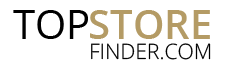
<style>
.page{position:relative;width:228px;height:72px;background:#ffffff}
.page>*{position:absolute;margin:0}
.t1{font:40px "OpenSans";color:#000000}
.t2{font:40px "OpenSans-Semibold";color:#b49b65}
.t3{font:21.3px "OpenSans-Light";color:#000000}
</style>
<div class="page">
<p class="t1" style="left:13px;top:10px;width:75px;height:29px">TOP</p>
<p class="t2" style="left:90px;top:10px;width:120px;height:29px">STORE</p>
<p class="t3" style="left:91px;top:43px;width:120px;height:17px">FINDER.COM</p>
</div>
